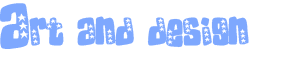
<style>
.page{position:relative;width:300px;height:60px;background:#ffffff}
.page>*{position:absolute;margin:0}
.t1{font:28px "D'après "SkaterDudes" de Pizza Dude (www.pizzadude.cjb.net)";color:#7ea8fe}
.t2{font:46px "D'après "SkaterDudes" de Pizza Dude (www.pizzadude.cjb.net)";color:#7ea8fe}
</style>
<div class="page">
<p class="t1" style="left:0px;top:3px;width:249px;height:46px"><span class="t2">A</span>RT AND DESIGN</p>
</div>
